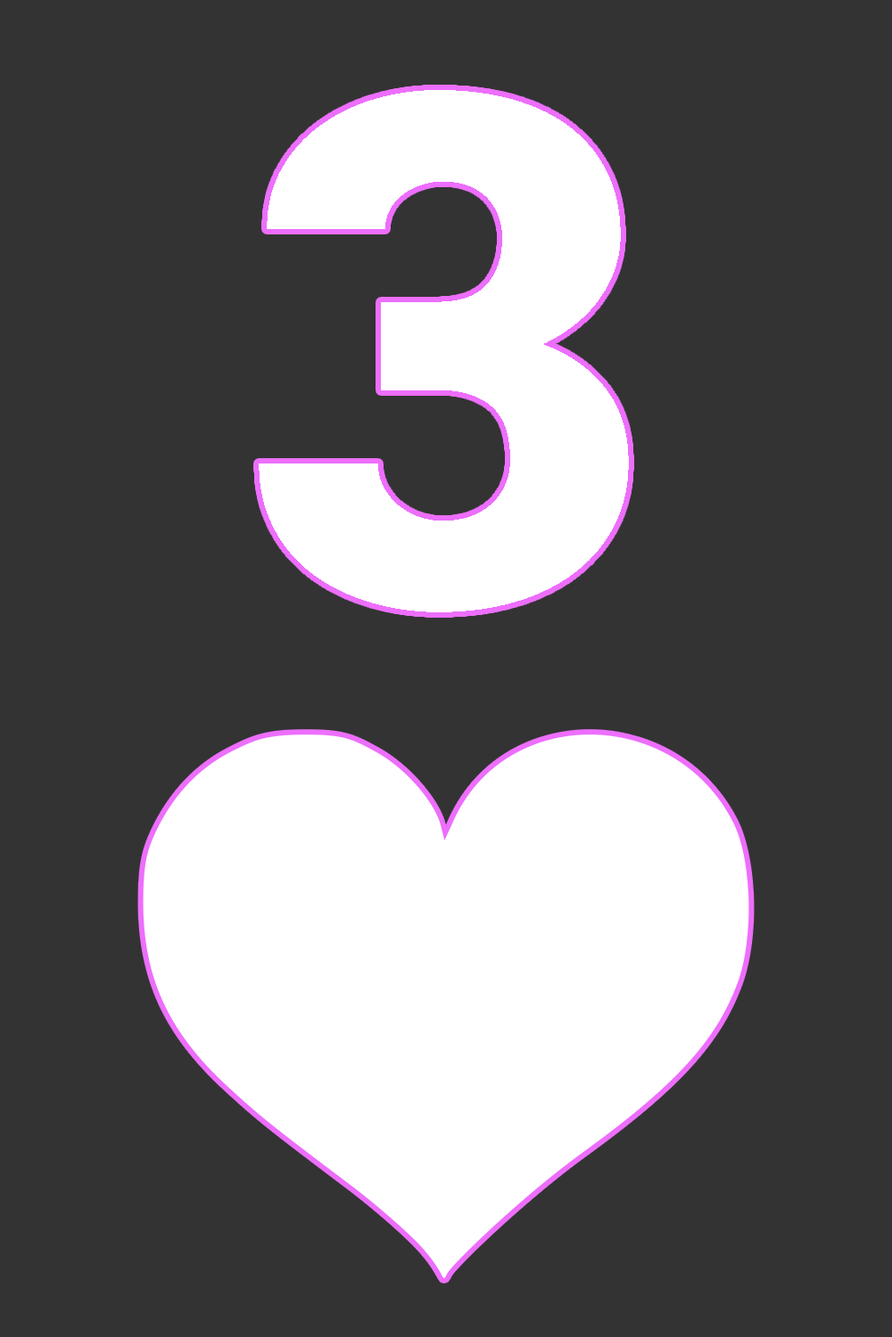
<style>
.page{position:relative;width:892px;height:1337px;background:#333333}
.page>*{position:absolute;margin:0}
.t1{font:713.3px "Roboto-Black";letter-spacing:0.02em;color:#ffffff}
</style>
<div class="page">
<p class="t1" style="left:259px;top:90px;width:370px;height:523px">3</p>
</div>
